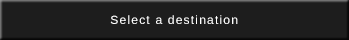
<style>
.page{position:relative;width:349px;height:40px;background:#1d1d1d}
.page>*{position:absolute;margin:0}
.t1{font:12px "LiberationSans";letter-spacing:0.1em;color:#ffffff}
</style>
<div class="page">
<p class="t1" style="left:110px;top:15px;width:128px;height:9px">Select a destination</p>
</div>
